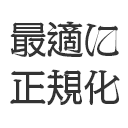
<style>
.page{position:relative;width:128px;height:128px;background:#ffffff}
.page>*{position:absolute;margin:0}
.t1{font:36px/48px "VDL-KyoSensya-Regular";letter-spacing:0.03em;color:#333333}
</style>
<div class="page">
<p class="t1" style="left:10px;top:21px;width:110px;height:84px">最適に<br>正規化</p>
</div>
